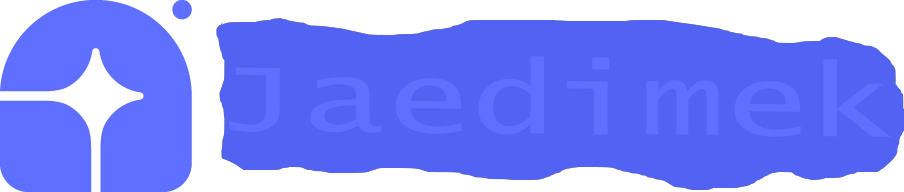
<style>
.page{position:relative;width:904px;height:192px;background:#5262f2}
.page>*{position:absolute;margin:0}
.t1{font:100px "LucidaConsole";color:#5f6fff;scale:1.41 1}
</style>
<div class="page">
<p class="t1" style="left:229px;top:56px;width:662px;height:81px;rotate:1deg">Jaedimek</p>
</div>
